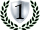
<style>
.page{position:relative;width:40px;height:30px;background:#ffffff}
.page>*{position:absolute;margin:0}
.t1{font:21.2px "BookAntiqua";color:#000000}
</style>
<div class="page">
<p class="t1" style="left:15px;top:4px;width:9px;height:15px">1</p>
</div>
